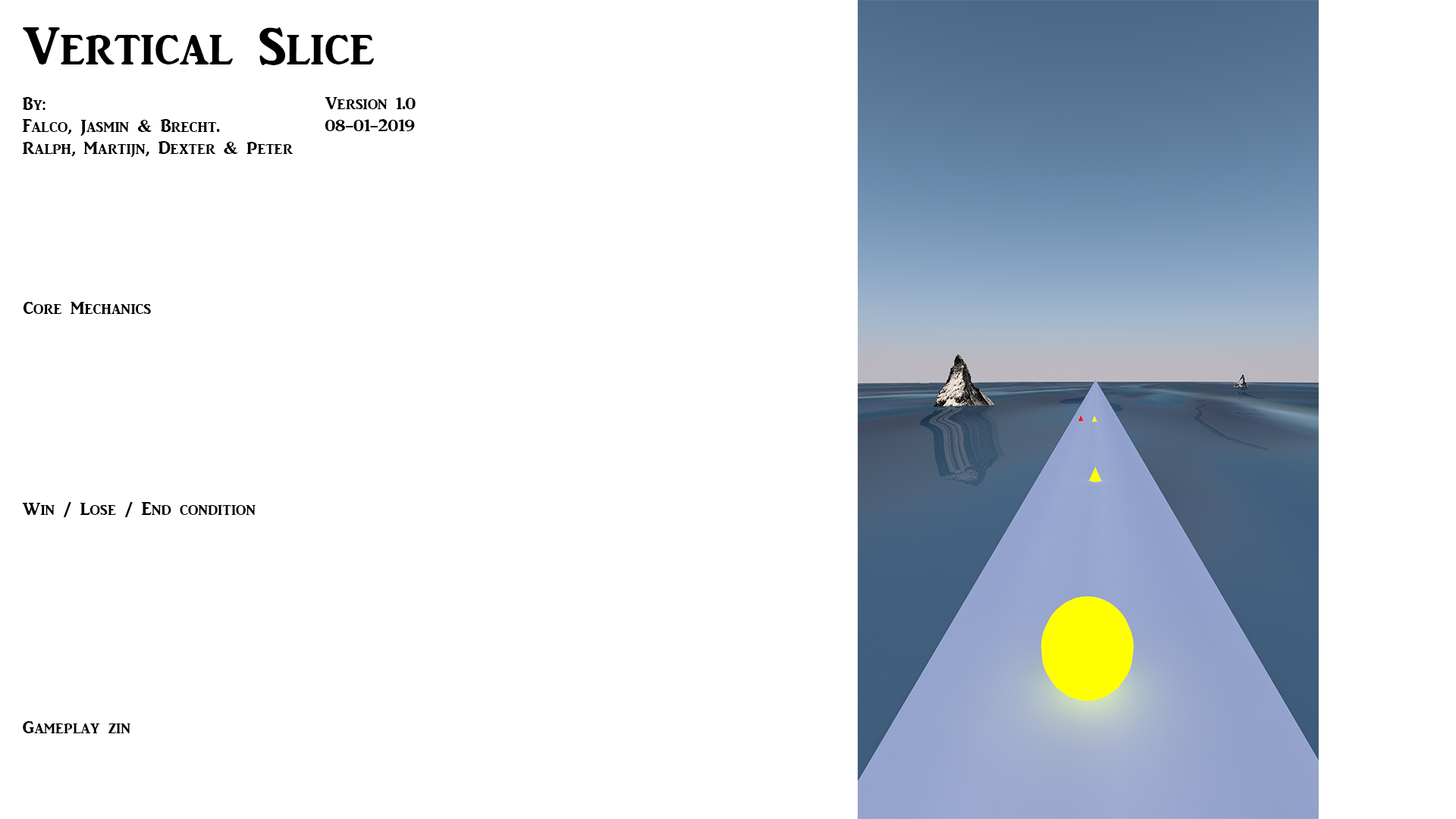
<style>
.page{position:relative;width:1456px;height:819px;background:#ffffff}
.page>*{position:absolute;margin:0}
.t1{font:54.6px "ARJULIAN";color:#000000}
.t2{font:18.2px "ARJULIAN";color:#000000}
</style>
<div class="page">
<p class="t1" style="left:23px;top:27px;width:351px;height:38px">Vertical Slice</p>
<p class="t2" style="left:22px;top:97px;width:271px;height:60px">By:<br>Falco, Jasmin &amp; Brecht.<br>Ralph, Martijn, Dexter &amp; Peter</p>
<p class="t2" style="left:325px;top:97px;width:91px;height:34px">Version 1.0<br>08-01-2019</p>
<p class="t2" style="left:23px;top:302px;width:128px;height:12px">Core Mechanics</p>
<p class="t2" style="left:22px;top:502px;width:234px;height:15px">Win / Lose / End condition</p>
<p class="t2" style="left:23px;top:721px;width:107px;height:12px">Gameplay zin</p>
</div>
